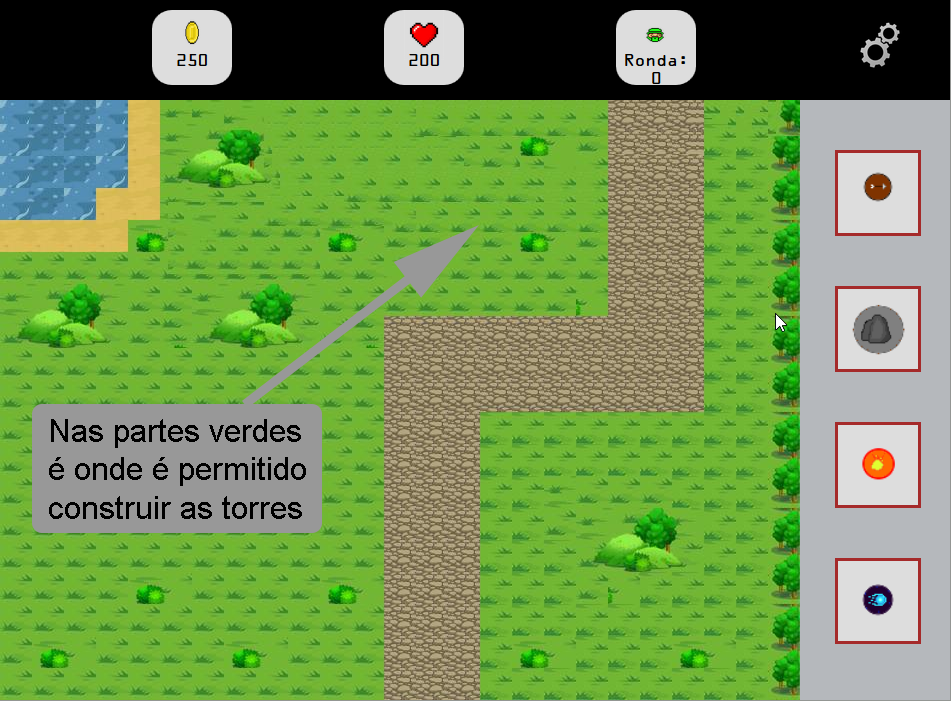
<style>
.page{position:relative;width:951px;height:701px}
.page>*{position:absolute;margin:0}
.t1{font:32px "ArialMT";color:#000000}
</style>
<div class="page">
<p class="t1" style="left:49px;top:419px;width:257px;height:100px">Nas partes verdes<br>é onde é permitido<br>construir as torres</p>
</div>
